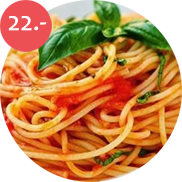
<style>
.page{position:relative;width:182px;height:182px}
.page>*{position:absolute;margin:0}
.t1{font:27.3px "Candara";color:#ffffff}
</style>
<div class="page">
<p class="t1" style="left:8px;top:16px;width:39px;height:15px">22.-</p>
</div>
